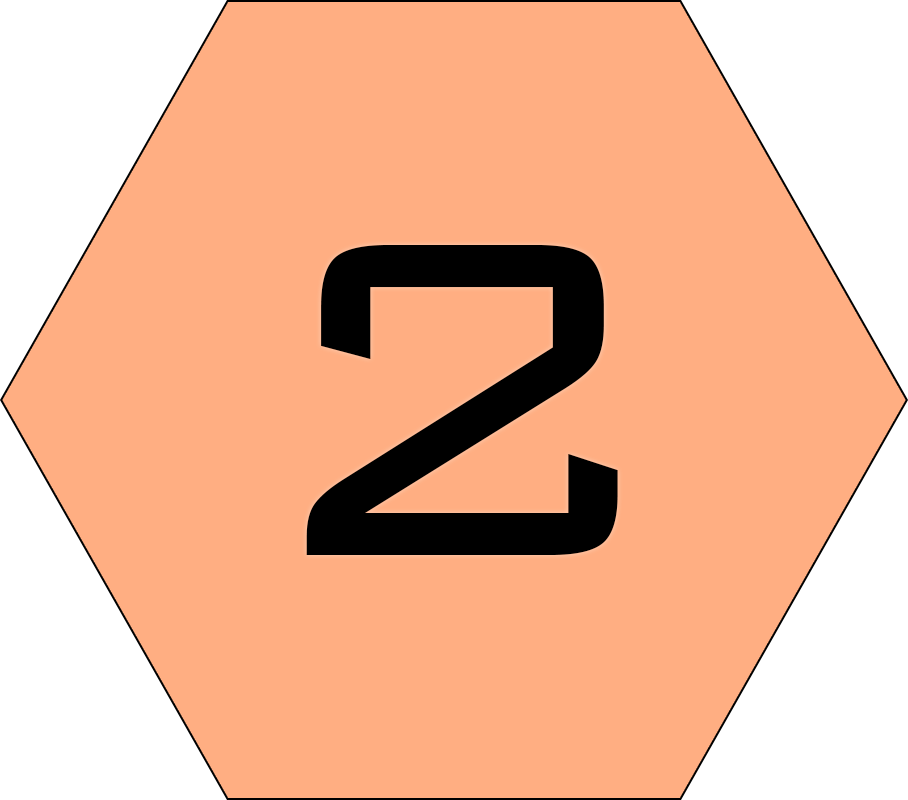
<style>
.page{position:relative;width:908px;height:800px;background:#ffae82}
.page>*{position:absolute;margin:0}
.t1{font:600px "BankGothicBT-Light";color:#000000}
</style>
<div class="page">
<p class="t1" style="left:306px;top:245px;width:312px;height:310px">2</p>
</div>
